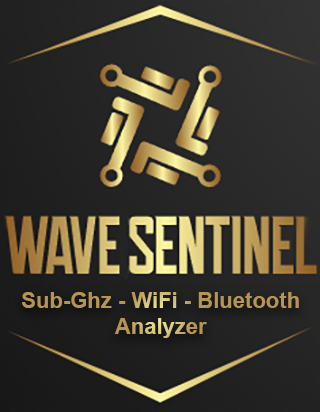
<style>
.page{position:relative;width:320px;height:412px}
.page>*{position:absolute;margin:0}
.t1{font:22px "Arial-BoldMT";color:#b69552}
</style>
<div class="page">
<p class="t1" style="left:22px;top:292px;width:277px;height:46px;text-align:center">Sub-Ghz - WiFi - Bluetooth<br>Analyzer</p>
</div>
